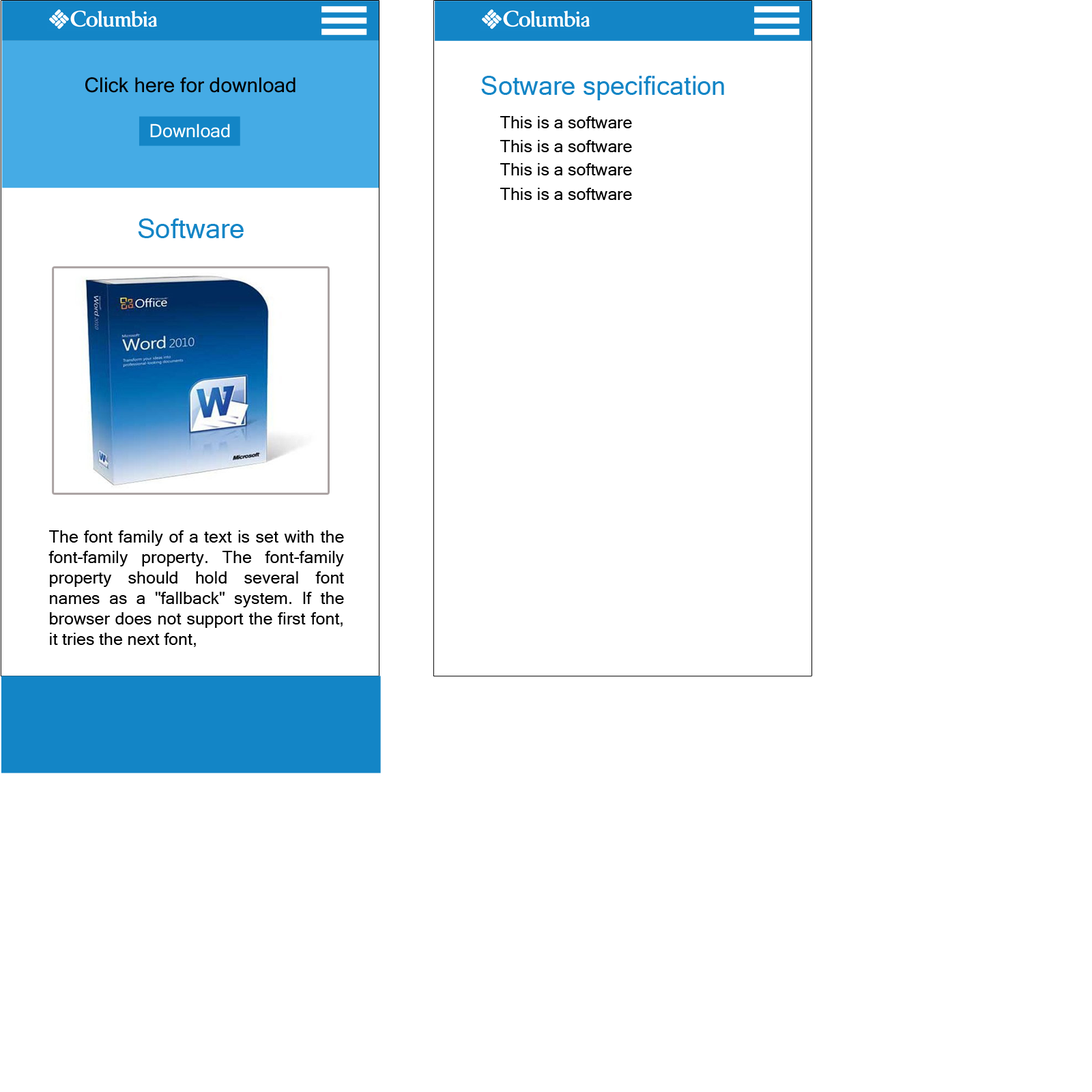
<style>
.page{position:relative;width:1092px;height:1092px;background:#ffffff}
.page>*{position:absolute;margin:0}
.t1{font:20.5px "MicrosoftSansSerif";color:#000000}
.t2{font:25.9px "MicrosoftSansSerif";color:#1385c6}
.t3{font:18.4px "MicrosoftSansSerif";color:#ffffff}
.t4{font:17.1px "MicrosoftSansSerif";color:#010101}
.t5{font:27.3px "MicrosoftSansSerif";color:#1385c6}
</style>
<div class="page">
<p class="t1" style="left:85px;top:77px;width:211px;height:16px">Click here for download</p>
<p class="t2" style="left:481px;top:76px;width:243px;height:24px">Sotware specification</p>
<p class="t3" style="left:150px;top:124px;width:80px;height:14px">Download</p>
<p class="t4" style="left:500px;top:116px;width:132px;height:12px">This is a software</p>
<p class="t4" style="left:500px;top:140px;width:132px;height:12px">This is a software</p>
<p class="t4" style="left:500px;top:163px;width:132px;height:12px">This is a software</p>
<p class="t4" style="left:500px;top:188px;width:132px;height:12px">This is a software</p>
<p class="t5" style="left:138px;top:218px;width:106px;height:20px">Software</p>
<p class="t4" style="left:48px;top:530px;width:296px;height:117px;text-align:justify">The font family of a text is set with the font-family property. The font-family property should hold several font names as a "fallback" system. If the browser does not support the first font, it tries the next font,</p>
</div>
